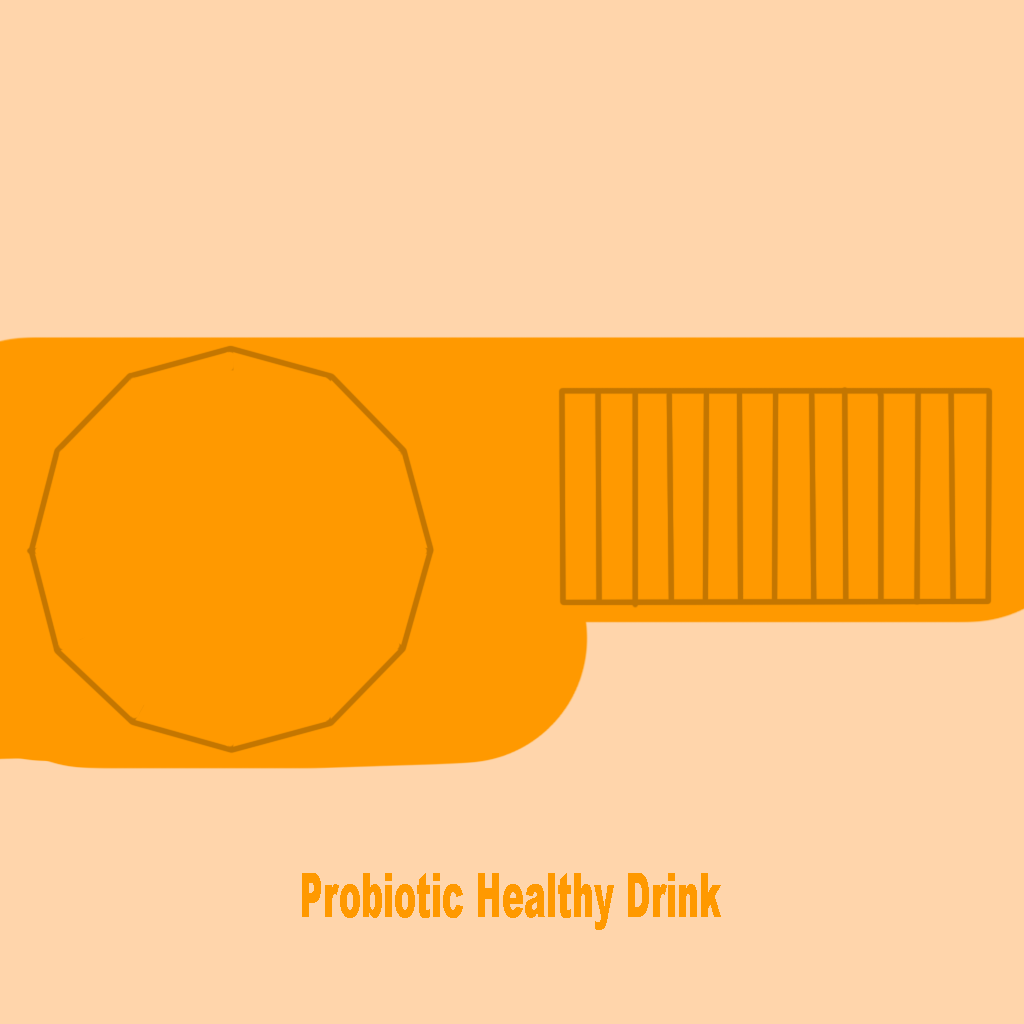
<style>
.page{position:relative;width:1024px;height:1024px;background:#ffd5ab}
.page>*{position:absolute;margin:0}
.t1{font:61.7px "Arial-Black";color:#ff9900;scale:0.54 1}
</style>
<div class="page">
<p class="t1" style="left:302px;top:873px;width:419px;height:57px">Probiotic Healthy Drink</p>
</div>
